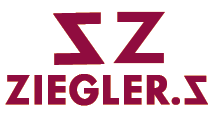
<style>
.page{position:relative;width:215px;height:115px;background:#ffffff}
.page>*{position:absolute;margin:0}
.t1{font:79px "TwCenMT-Bold";color:#900c3f;font-weight:bold;scale:1.21 1}
.t2{font:79px "TwCenMT-Bold";color:#900c3f;font-weight:bold;scale:1.29 1}
.t3{font:45.4px "TwCenMT-Bold";color:#900c3f;font-weight:bold}
.t4{font:43.9px "TwCenMT-Bold";color:#900c3f;font-weight:bold}
</style>
<div class="page">
<p class="t1" style="left:53px;top:12px;width:52px;height:53px;rotate:179deg">Z</p>
<p class="t2" style="left:113px;top:11px;width:52px;height:53px">Z</p>
<p class="t3" style="left:5px;top:74px;width:165px;height:32px">ZIEGLER</p>
<p class="t4" style="left:171px;top:75px;width:37px;height:30px;rotate:180deg">Z.</p>
</div>
